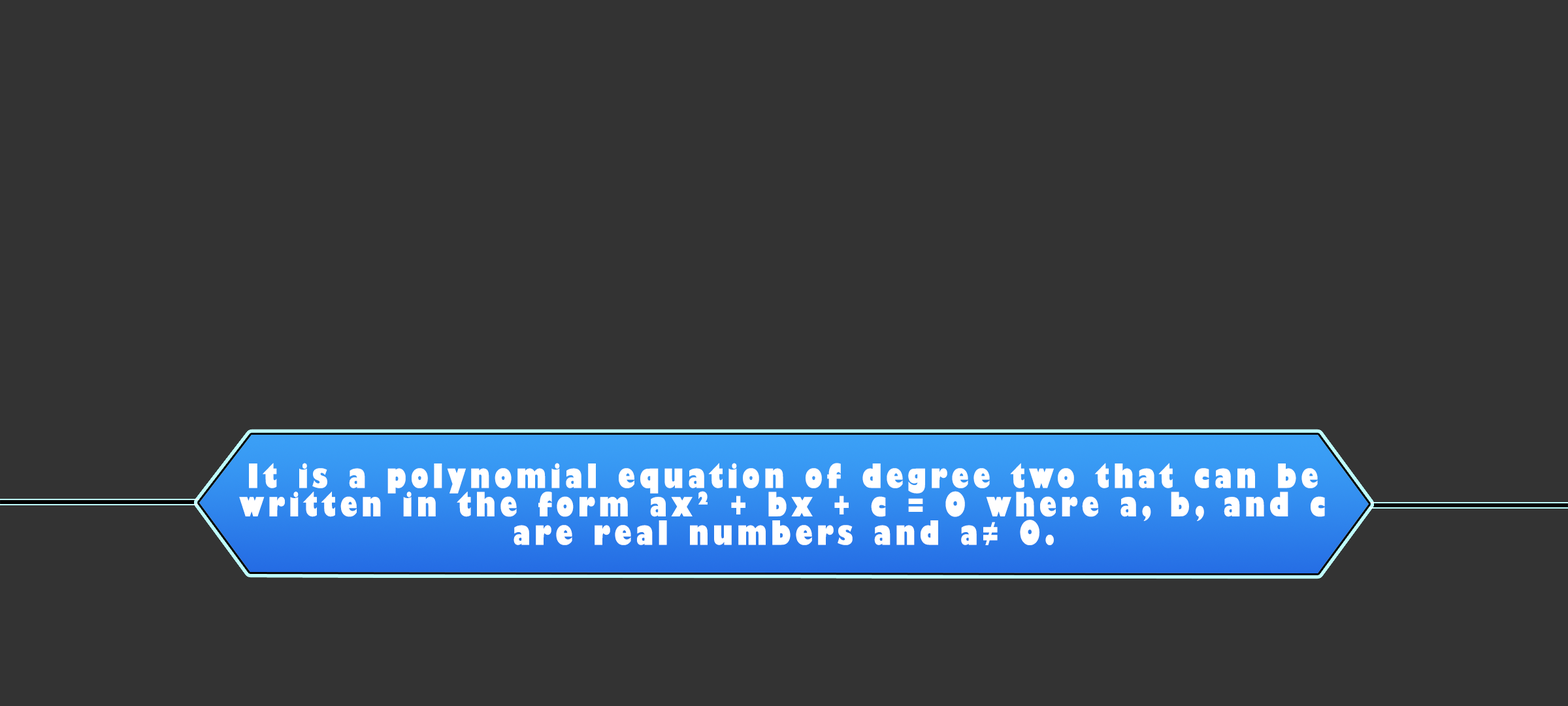
<style>
.page{position:relative;width:1568px;height:706px;background:#333333}
.page>*{position:absolute;margin:0}
.t1{font:32.7px/28.4px "GillSans-UltraBoldCondensed";letter-spacing:0.115em;color:#ffffff;scale:1.12 1}
</style>
<div class="page">
<p class="t1" style="left:239px;top:463px;width:1086px;height:82px;text-align:center">It is a polynomial equation of degree two that can be<br>written in the form ax² + bx + c = 0 where a, b, and c<br>are real numbers and a≠ 0.</p>
</div>
